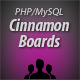
<style>
.page{position:relative;width:80px;height:80px}
.page>*{position:absolute;margin:0}
.t1{font:10px "MyriadPro-It";color:#cccccc}
.t2{font:17.9px/16px "MyriadPro-BoldCondIt";color:#cccccc}
</style>
<div class="page">
<p class="t1" style="left:15px;top:8px;width:48px;height:9px">PHP/MySQL</p>
<p class="t2" style="left:9px;top:18px;width:60px;height:29px;text-align:center">Cinnamon<br>Boards</p>
</div>
